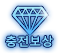
<style>
.page{position:relative;width:61px;height:53px}
.page>*{position:absolute;margin:0}
.t1{font:12px "MalgunGothicBold";color:#87d7fe}
</style>
<div class="page">
<p class="t1" style="left:6px;top:35px;width:47px;height:12px">충전보상</p>
</div>
